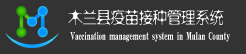
<style>
.page{position:relative;width:246px;height:54px;background:#333333}
.page>*{position:absolute;margin:0}
.t1{font:15.9px "FZXSHK--GBK1-0";letter-spacing:-0.02em;color:#ffffff;scale:0.91 1}
.t2{font:11px "HYa9gj";letter-spacing:-0.02em;color:#ffffff;scale:0.62 1}
</style>
<div class="page">
<p class="t1" style="left:68px;top:9px;width:156px;height:17px">木兰县疫苗接种管理系统</p>
<p class="t2" style="left:70px;top:32px;width:160px;height:10px">Vaccination management system in Mulan County</p>
</div>
